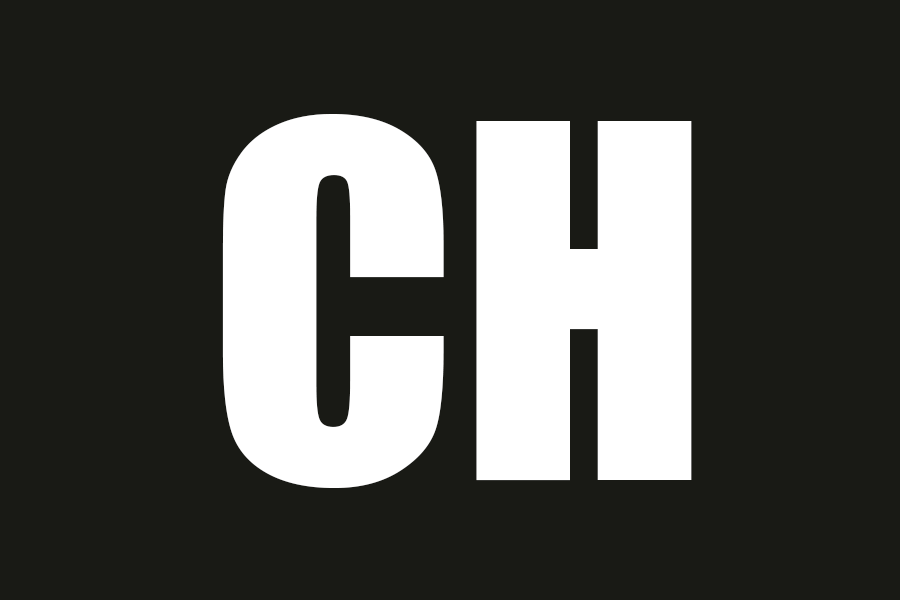
<style>
.page{position:relative;width:900px;height:600px;background:#191a15}
.page>*{position:absolute;margin:0}
.t1{font:454.2px "Impact";color:#ffffff}
</style>
<div class="page">
<p class="t1" style="left:222px;top:114px;width:470px;height:374px">CH</p>
</div>
